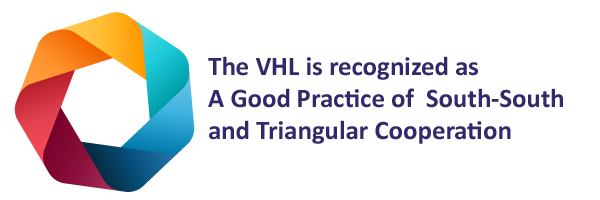
<style>
.page{position:relative;width:600px;height:200px;background:#ffffff}
.page>*{position:absolute;margin:0}
.t1{font:26.8px "Calibri-Bold";color:#32286a}
</style>
<div class="page">
<p class="t1" style="left:208px;top:56px;width:355px;height:88px">The VHL is recognized as<br>A Good Practice of  South-South<br>and Triangular Cooperation​</p>
</div>
